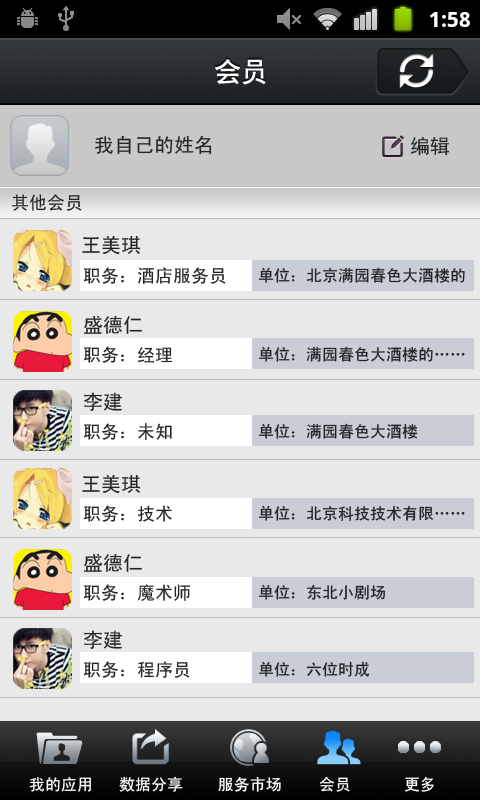
<style>
.page{position:relative;width:480px;height:800px;background:#eae9e9}
.page>*{position:absolute;margin:0}
.t1{font:27px "CTCuHeiSJ";color:#ffffff}
.t2{font:20px "SimHei";color:#212528}
.t3{font:18px "SimHei";color:#212528}
.t4{font:16px "SimHei";color:#212528}
.t5{font:16px "SimHei";color:#ffffff}
</style>
<div class="page">
<p class="t1" style="left:215px;top:59px;width:51px;height:26px">会员</p>
<p class="t2" style="left:95px;top:135px;width:117px;height:20px">我自己的姓名</p>
<p class="t2" style="left:411px;top:137px;width:39px;height:19px">编辑</p>
<p class="t3" style="left:12px;top:194px;width:70px;height:17px">其他会员</p>
<p class="t2" style="left:82px;top:235px;width:59px;height:20px">王美琪</p>
<p class="t3" style="left:83px;top:267px;width:143px;height:17px">职务：酒店服务员</p>
<p class="t4" style="left:258px;top:267px;width:207px;height:16px">单位：北京满园春色大酒楼的</p>
<p class="t2" style="left:84px;top:315px;width:58px;height:19px">盛德仁</p>
<p class="t3" style="left:83px;top:346px;width:90px;height:17px">职务：经理</p>
<p class="t4" style="left:258px;top:346px;width:207px;height:16px">单位：满园春色大酒楼的……</p>
<p class="t2" style="left:84px;top:392px;width:38px;height:19px">李建</p>
<p class="t3" style="left:83px;top:423px;width:89px;height:17px">职务：未知</p>
<p class="t4" style="left:258px;top:423px;width:160px;height:16px">单位：满园春色大酒楼</p>
<p class="t2" style="left:82px;top:474px;width:59px;height:20px">王美琪</p>
<p class="t3" style="left:83px;top:505px;width:89px;height:17px">职务：技术</p>
<p class="t4" style="left:258px;top:505px;width:207px;height:16px">单位：北京科技技术有限……</p>
<p class="t2" style="left:84px;top:553px;width:58px;height:19px">盛德仁</p>
<p class="t3" style="left:83px;top:584px;width:107px;height:17px">职务：魔术师</p>
<p class="t4" style="left:258px;top:584px;width:128px;height:16px">单位：东北小剧场</p>
<p class="t2" style="left:84px;top:630px;width:38px;height:19px">李建</p>
<p class="t3" style="left:83px;top:661px;width:107px;height:17px">职务：程序员</p>
<p class="t4" style="left:258px;top:661px;width:112px;height:16px">单位：六位时成</p>
<p class="t5" style="left:29px;top:777px;width:62px;height:15px">我的应用</p>
<p class="t5" style="left:119px;top:776px;width:64px;height:16px">数据分享</p>
<p class="t5" style="left:218px;top:776px;width:63px;height:16px">服务市场</p>
<p class="t5" style="left:319px;top:776px;width:31px;height:16px">会员</p>
<p class="t5" style="left:405px;top:776px;width:29px;height:16px">更多</p>
</div>
